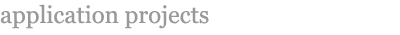
<style>
.page{position:relative;width:400px;height:35px;background:#ffffff}
.page>*{position:absolute;margin:0}
.t1{font:24px "Georgia";color:#999999}
</style>
<div class="page">
<p class="t1" style="left:0px;top:4px;width:209px;height:25px">application projects</p>
</div>
